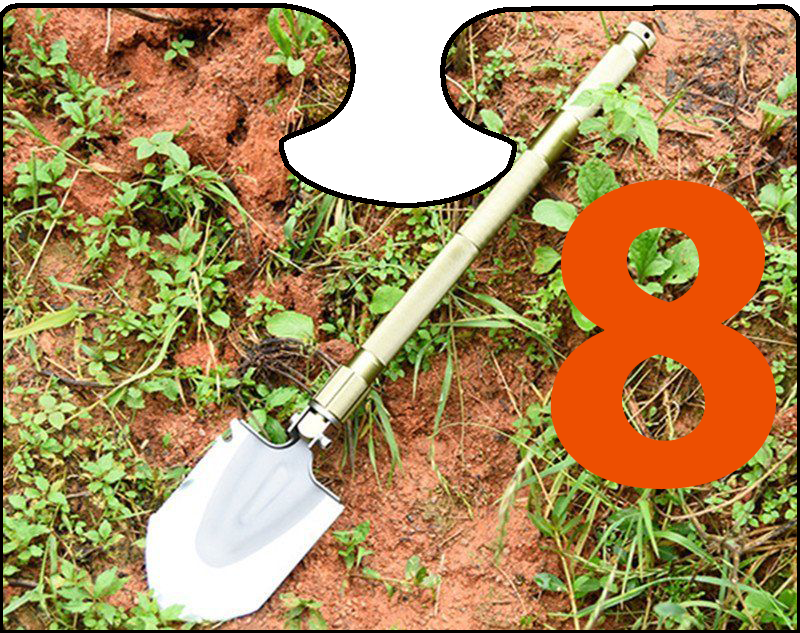
<style>
.page{position:relative;width:800px;height:633px}
.page>*{position:absolute;margin:0}
.t1{font:460px "MyriadPro-Bold";color:#ed4f01}
</style>
<div class="page">
<p class="t1" style="left:550px;top:179px;width:227px;height:310px">8</p>
</div>
